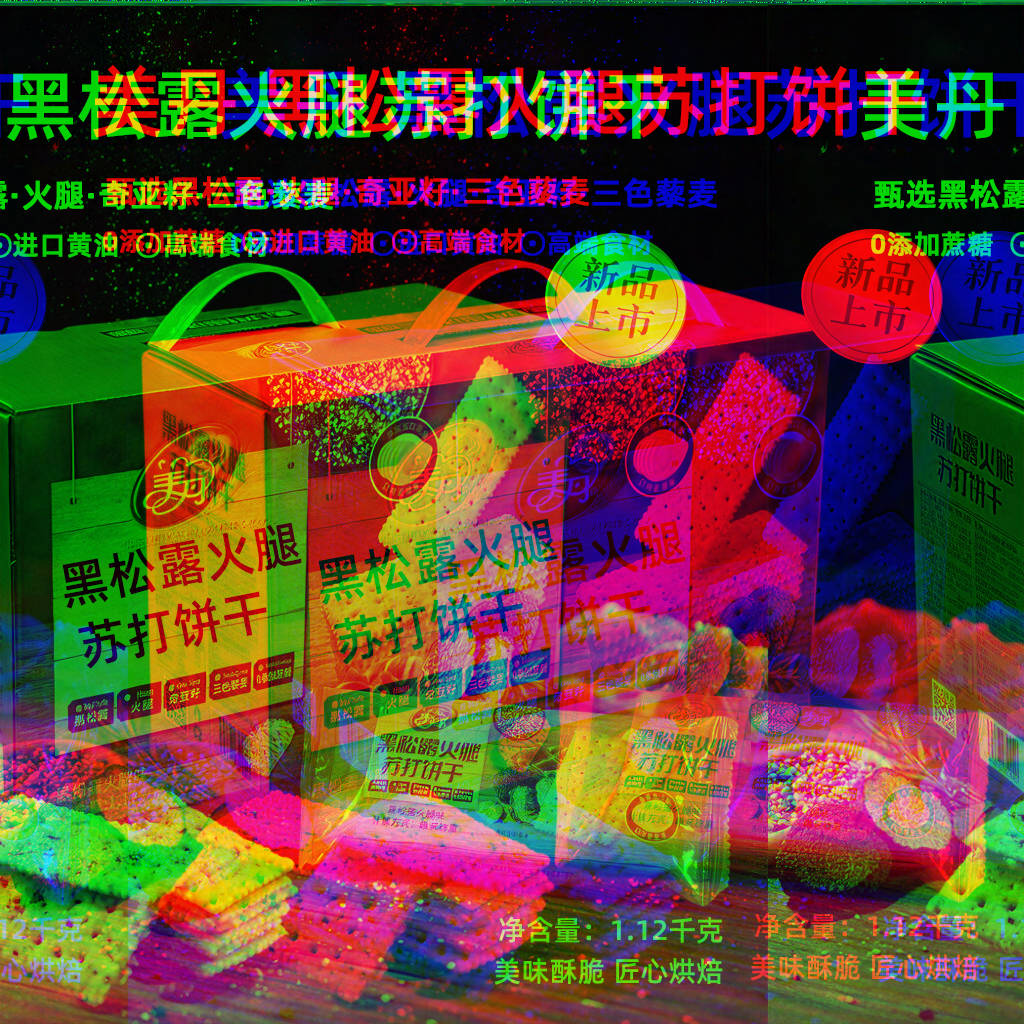
<style>
.page{position:relative;width:1024px;height:1024px}
.page>*{position:absolute;margin:0}
.t1{font:75.8px "AlibabaPuHuiTi-Medium"}
.t2{font:31.7px "AlibabaPuHuiTi-Medium";font-weight:bold}
.t3{font:26.7px "AlibabaPuHuiTi-Medium";font-weight:bold}
.t4{font:50px "AlibabaPuHuiTi-Medium"}
.t5{font:49.5px "AlibabaPuHuiTi-Medium"}
.t6{font:28.3px "AlibabaPuHuiTi-Medium"}
</style>
<div class="page">
<p class="t1" style="left:93px;top:63px;width:832px;height:73px">美丹 黑松露火腿苏打饼干</p>
<p class="t2" style="left:106px;top:173px;width:483px;height:32px">甄选黑松露·火腿·奇亚籽·三色藜麦</p>
<p class="t3" style="left:103px;top:226px;width:422px;height:26px">0添加蔗糖  ⊙进口黄油  ⊙高端食材</p>
<p class="t4" style="left:318px;top:516px;width:240px;height:87px;rotate:-11deg">黑松露火腿</p>
<p class="t5" style="left:334px;top:585px;width:189px;height:78px;rotate:-11deg">苏打饼干</p>
<p class="t6" style="left:755px;top:910px;width:224px;height:28px">净含量：1.12千克</p>
<p class="t6" style="left:750px;top:951px;width:229px;height:28px">美味酥脆 匠心烘焙</p>
</div>
